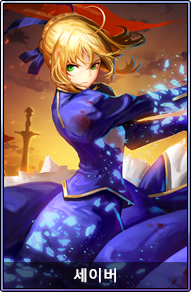
<style>
.page{position:relative;width:191px;height:292px}
.page>*{position:absolute;margin:0}
.t1{font:15px "MalgunGothicBold";color:#ffffff}
</style>
<div class="page">
<p class="t1" style="left:73px;top:268px;width:43px;height:15px">세이버</p>
</div>
